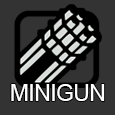
<style>
.page{position:relative;width:115px;height:115px;background:#333333}
.page>*{position:absolute;margin:0}
.t1{font:23px "ArialMT";letter-spacing:-0.025em;color:#ffffff}
</style>
<div class="page">
<p class="t1" style="left:11px;top:84px;width:94px;height:17px">MINIGUN</p>
</div>
